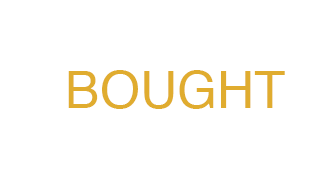
<style>
.page{position:relative;width:331px;height:175px;background:#ffffff}
.page>*{position:absolute;margin:0}
.t1{font:51.5px "Helvetica";color:#e0ac2f}
</style>
<div class="page">
<p class="t1" style="left:68px;top:70px;width:217px;height:39px">BOUGHT</p>
</div>
